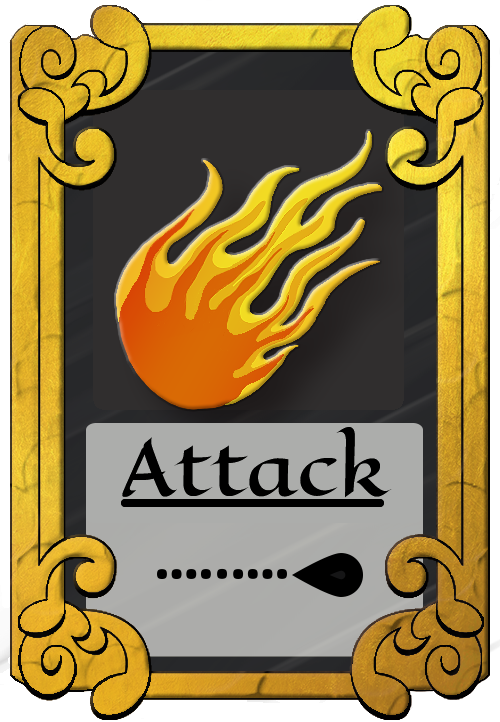
<style>
.page{position:relative;width:500px;height:722px}
.page>*{position:absolute;margin:0}
.t1{font:72px "EagleLake-Regular";color:#000000}
</style>
<div class="page">
<p class="t1" style="left:122px;top:427px;width:270px;height:71px">Attack</p>
<p class="t1" style="left:122px;top:427px;width:270px;height:71px">Attack</p>
</div>
